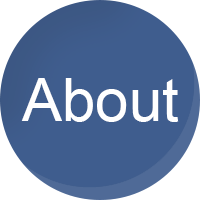
<style>
.page{position:relative;width:200px;height:200px;background:#3f5d8e}
.page>*{position:absolute;margin:0}
.t1{font:60px "ArialMT";color:#ffffff}
</style>
<div class="page">
<p class="t1" style="left:21px;top:78px;width:158px;height:44px">About</p>
</div>
